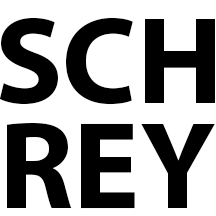
<style>
.page{position:relative;width:216px;height:216px;background:#ffffff}
.page>*{position:absolute;margin:0}
.t1{font:125px "MyriadPro-Bold";color:#000000}
</style>
<div class="page">
<p class="t1" style="left:0px;top:17px;width:215px;height:88px">SCH</p>
<p class="t1" style="left:7px;top:123px;width:208px;height:86px">REY</p>
</div>
